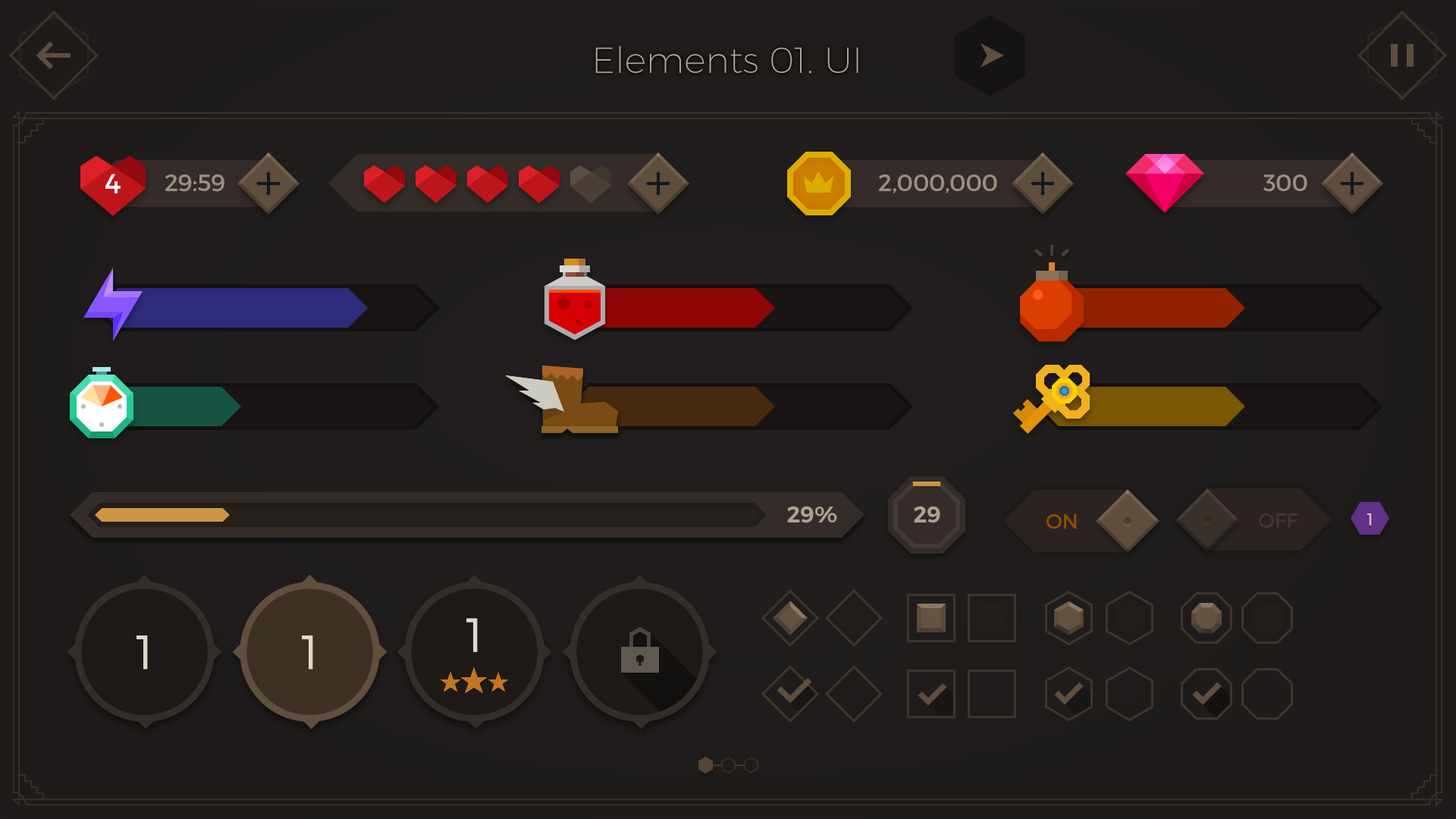
<style>
.page{position:relative;width:1456px;height:819px}
.page>*{position:absolute;margin:0}
.t1{font:36.4px "Montserrat-UltraLight";color:#aea190}
.t2{font:27.3px "Montserrat-Regular";color:#ffffff}
.t3{font:23.5px "Montserrat-Regular";color:#aea190}
.t4{font:22.7px "Montserrat-SemiBold";color:#aea190;text-transform:uppercase}
.t5{font:20.5px "Montserrat-Regular";color:#934c00}
.t6{font:20.6px "Montserrat-Regular";color:#3e3732}
.t7{font:17.1px "Montserrat-Regular";color:#dab1d1;text-transform:uppercase}
.t8{font:47.8px "Montserrat-Light";color:#e1d7ca;text-transform:uppercase}
</style>
<div class="page">
<p class="t1" style="left:595px;top:45px;width:263px;height:29px">Elements 01. UI</p>
<p class="t2" style="left:105px;top:174px;width:16px;height:19px">4</p>
<p class="t3" style="left:165px;top:174px;width:59px;height:18px;opacity:0.8">29:59</p>
<p class="t3" style="left:879px;top:174px;width:118px;height:19px;opacity:0.8">2,000,000</p>
<p class="t3" style="left:1263px;top:174px;width:44px;height:18px;opacity:0.8">300</p>
<p class="t4" style="left:787px;top:506px;width:50px;height:17px">29%</p>
<p class="t4" style="left:914px;top:506px;width:26px;height:17px">29</p>
<p class="t5" style="left:1046px;top:514px;width:31px;height:15px">ON</p>
<p class="t6" style="left:1259px;top:513px;width:38px;height:16px">OFF</p>
<p class="t7" style="left:1366px;top:513px;width:6px;height:13px">1</p>
<p class="t8" style="left:466px;top:618px;width:12px;height:34px">1</p>
<p class="t8" style="left:136px;top:635px;width:12px;height:35px">1</p>
<p class="t8" style="left:302px;top:635px;width:11px;height:35px">1</p>
</div>
